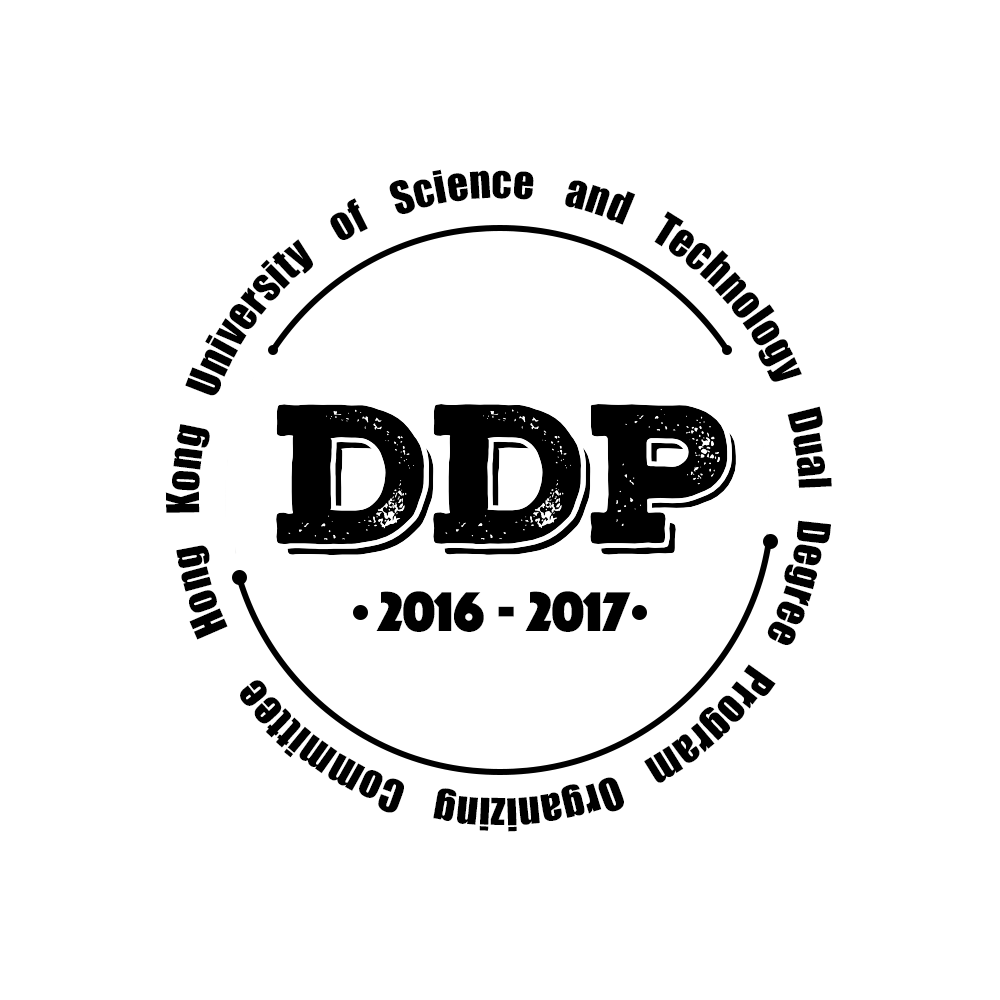
<style>
.page{position:relative;width:1000px;height:1000px;background:#ffffff}
.page>*{position:absolute;margin:0}
.t1{font:41.7px "Impact";color:#000000}
.t2{font:41.7px "LiGothicMed";color:#000000}
.t3{font:58.3px "Phosphate-Solid";color:#000000}
</style>
<div class="page">
<p class="t1" style="left:165px;top:169px;width:667px;height:663px;text-align:justify"><span class="t2"> </span>Hong Kong University of Science and Technology Dual Degree Program Organizing Committee</p>
<p class="t3" style="left:376px;top:591px;width:255px;height:41px">2016 - 2017</p>
</div>
